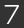
<style>
.page{position:relative;width:24px;height:28px;background:#333333}
.page>*{position:absolute;margin:0}
.t1{font:27.3px "NexaLight";color:#ffffff}
</style>
<div class="page">
<p class="t1" style="left:4px;top:5px;width:15px;height:19px">7</p>
</div>
